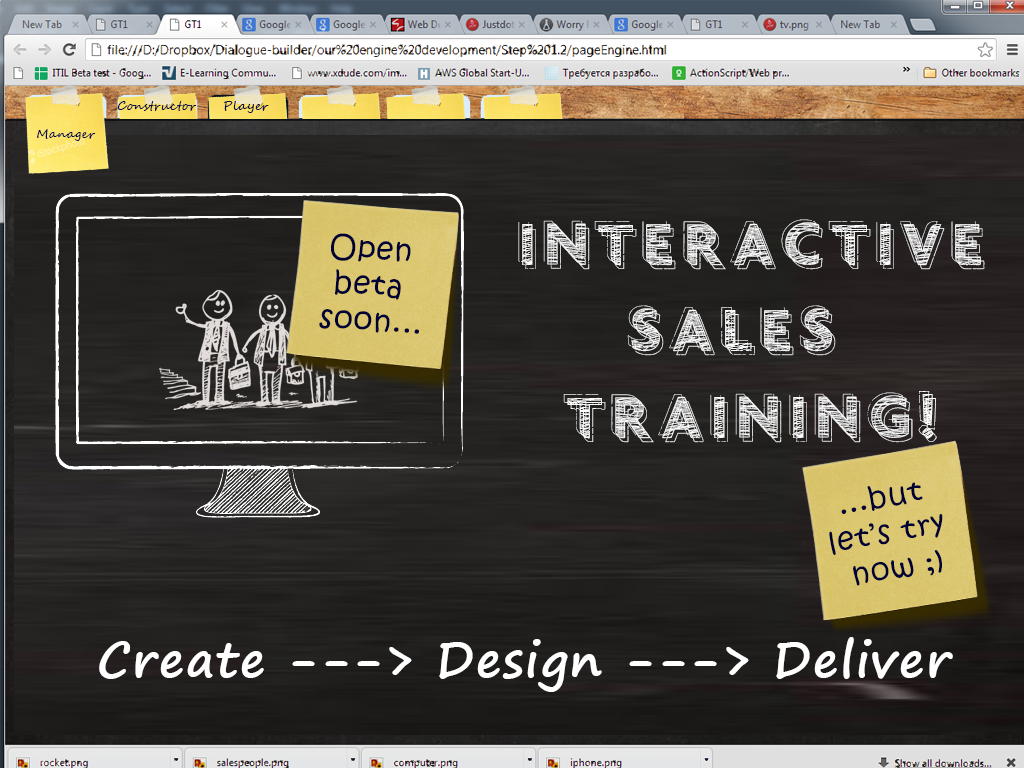
<style>
.page{position:relative;width:1024px;height:768px}
.page>*{position:absolute;margin:0}
.t1{font:12px "SegoeScript";letter-spacing:0.04em;color:#00054c}
.t2{font:72px "vtkschalk79";letter-spacing:0.04em;color:#ffffff}
.t3{font:30px "KristenITC-Regular";letter-spacing:0.04em;color:#010034}
.t4{font:48px "SegoePrint-Bold";letter-spacing:0.04em;color:#ffffff}
</style>
<div class="page">
<p class="t1" style="left:117px;top:101px;width:80px;height:10px">Constructor</p>
<p class="t1" style="left:224px;top:101px;width:45px;height:12px">Player</p>
<p class="t1" style="left:37px;top:129px;width:59px;height:12px">Manager</p>
<p class="t2" style="left:518px;top:219px;width:467px;height:224px;text-align:center">INTERACTIVE<br>SALES <br>TRAINING!</p>
<p class="t3" style="left:319px;top:233px;width:100px;height:101px;text-align:center;rotate:4deg">Open <br>beta <br>soon...</p>
<p class="t3" style="left:829px;top:482px;width:114px;height:104px;text-align:center;rotate:-10deg">...but <br>let’s try <br>now ;)</p>
<p class="t4" style="left:99px;top:637px;width:854px;height:55px">Create ---&gt; Design ---&gt; Deliver</p>
</div>
